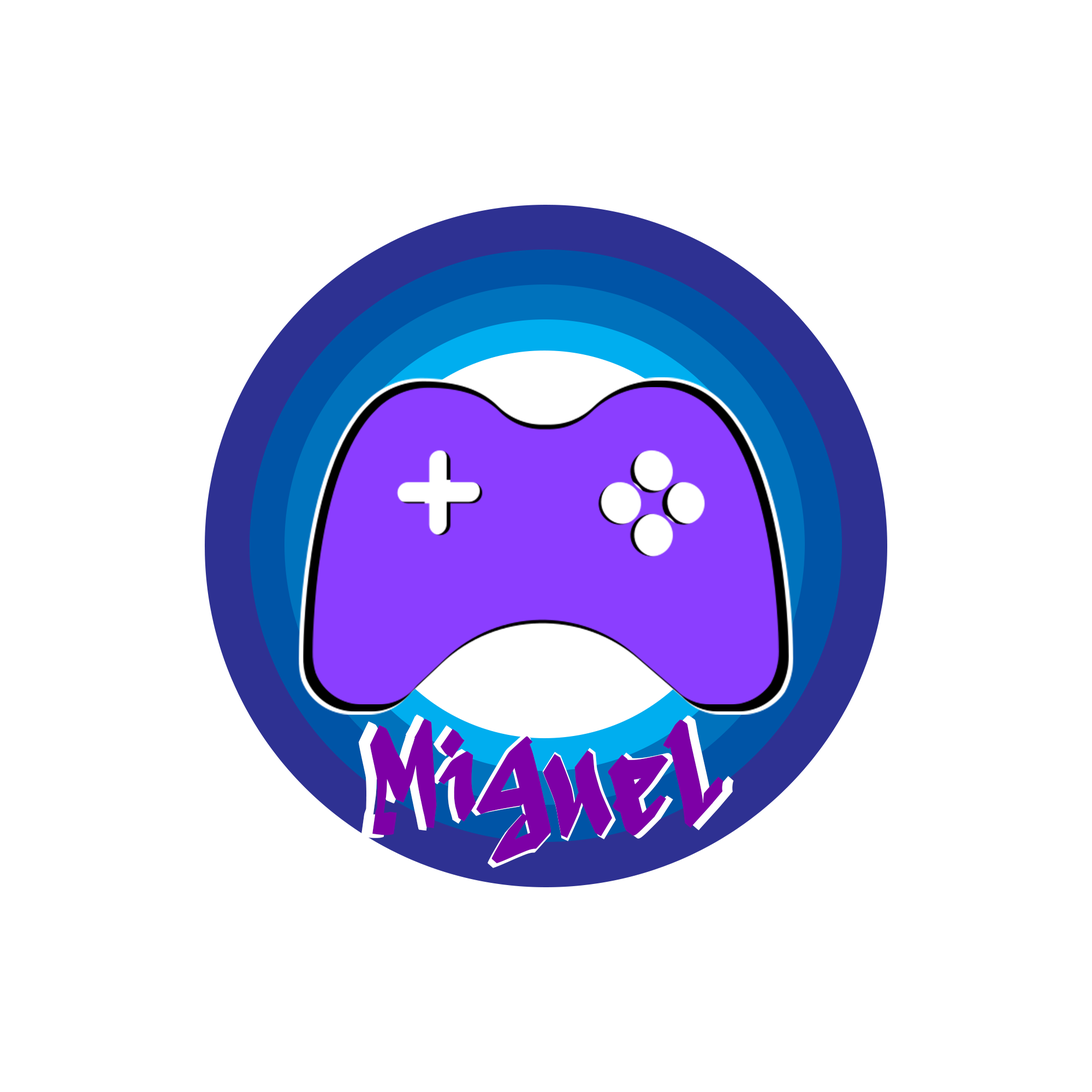
<style>
.page{position:relative;width:1092px;height:1092px;background:#ffffff}
.page>*{position:absolute;margin:0}
.t1{font:142.2px "BlackDestroyPersonalRegular"}
.t2{font:134px "BlackDestroyPersonalRegular";color:#7d00a6}
</style>
<div class="page">
<p class="t1" style="left:358px;top:714px;width:376px;height:154px">Miguel</p>
<p class="t2" style="left:370px;top:719px;width:353px;height:145px">Miguel</p>
</div>
